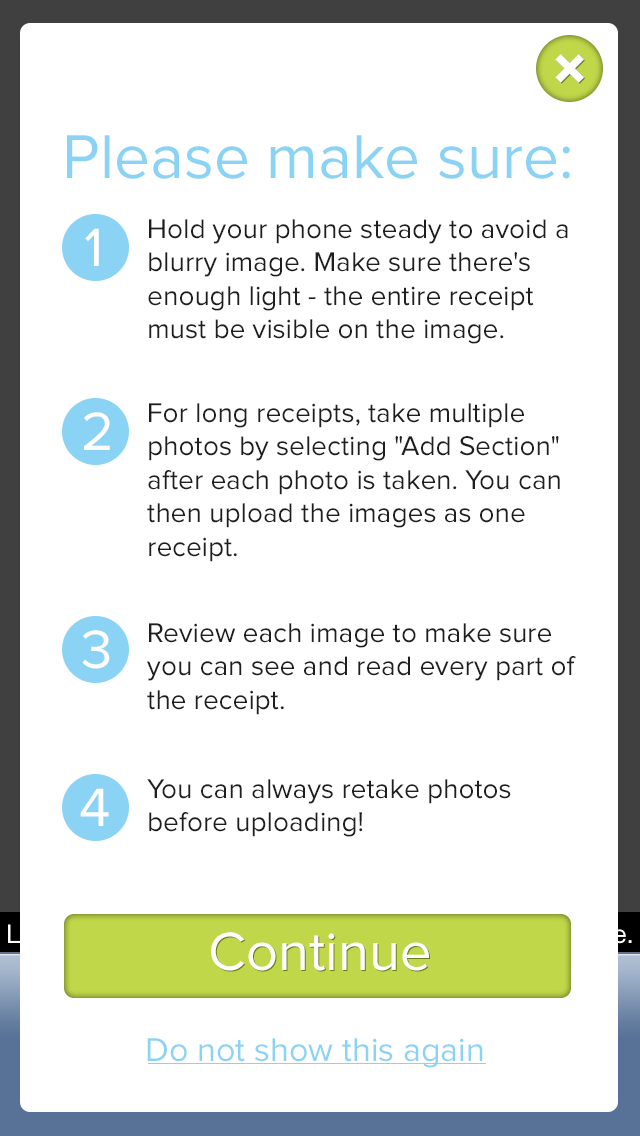
<style>
.page{position:relative;width:640px;height:1136px;background:#ffffff}
.page>*{position:absolute;margin:0}
.t1{font:64px "Futura-Heavy";color:#ffffff}
.t2{font:64px "ProximaNova-Regular";color:#8bd3f5}
.t3{font:28px "ProximaNova-Regular";color:#1e1e1e}
.t4{font:56px "ProximaNova-Regular";color:#ffffff}
.t5{font:34px "ProximaNova-Regular";color:#8bd3f5}
</style>
<div class="page">
<p class="t1" style="left:555px;top:54px;width:29px;height:29px;rotate:45deg">+</p>
<p class="t2" style="left:67px;top:135px;width:503px;height:44px">Please make sure:</p>
<p class="t3" style="left:148px;top:219px;width:420px;height:125px">Hold your phone steady to avoid a blurry image. Make sure there's enough light - the entire receipt must be visible on the image.</p>
<p class="t4" style="left:85px;top:228px;width:14px;height:38px">1</p>
<p class="t4" style="left:84px;top:412px;width:26px;height:38px">2</p>
<p class="t3" style="left:147px;top:403px;width:413px;height:159px">For long receipts, take multiple photos by selecting "Add Section" after each photo is taken. You can then upload the images as one <br>receipt.</p>
<p class="t4" style="left:82px;top:630px;width:28px;height:39px">3</p>
<p class="t3" style="left:147px;top:623px;width:429px;height:92px">Review each image to make sure you can see and read every part of the receipt.</p>
<p class="t3" style="left:147px;top:779px;width:364px;height:58px">You can always retake photos before uploading!</p>
<p class="t4" style="left:80px;top:788px;width:29px;height:38px">4</p>
<p class="t4" style="left:211px;top:932px;width:218px;height:39px">Continue</p>
<p class="t5" style="left:147px;top:1038px;width:336px;height:30px">Do not show this again</p>
</div>
